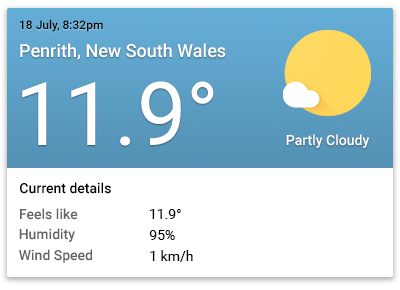
<style>
.page{position:relative;width:400px;height:290px;background:#ffffff}
.page>*{position:absolute;margin:0}
.t1{font:12px "Roboto-Medium";color:#000000}
.t2{font:18px "Roboto-Medium";color:#ffffff}
.t3{font:88px "Roboto-Regular";color:#ffffff}
.t4{font:14px "Roboto-Medium";color:#ffffff}
.t5{font:14px "Roboto-Medium";color:#000000}
.t6{font:14px "Roboto-Medium";color:#636363}
.t7{font:14px "Roboto-Regular";color:#000000}
</style>
<div class="page">
<p class="t1" style="left:20px;top:19px;width:83px;height:13px">18 July, 8:32pm</p>
<p class="t2" style="left:20px;top:43px;width:206px;height:17px">Penrith, New South Wales</p>
<p class="t3" style="left:22px;top:81px;width:192px;height:65px">11.9°</p>
<p class="t4" style="left:286px;top:134px;width:84px;height:14px">Partly Cloudy</p>
<p class="t5" style="left:20px;top:182px;width:91px;height:12px">Current details</p>
<p class="t6" style="left:20px;top:208px;width:58px;height:12px">Feels like</p>
<p class="t7" style="left:150px;top:209px;width:31px;height:10px">11.9°</p>
<p class="t6" style="left:19px;top:228px;width:56px;height:14px">Humidity</p>
<p class="t7" style="left:149px;top:230px;width:26px;height:10px">95%</p>
<p class="t6" style="left:19px;top:249px;width:73px;height:14px">Wind Speed</p>
<p class="t7" style="left:150px;top:250px;width:43px;height:12px">1 km/h</p>
</div>
